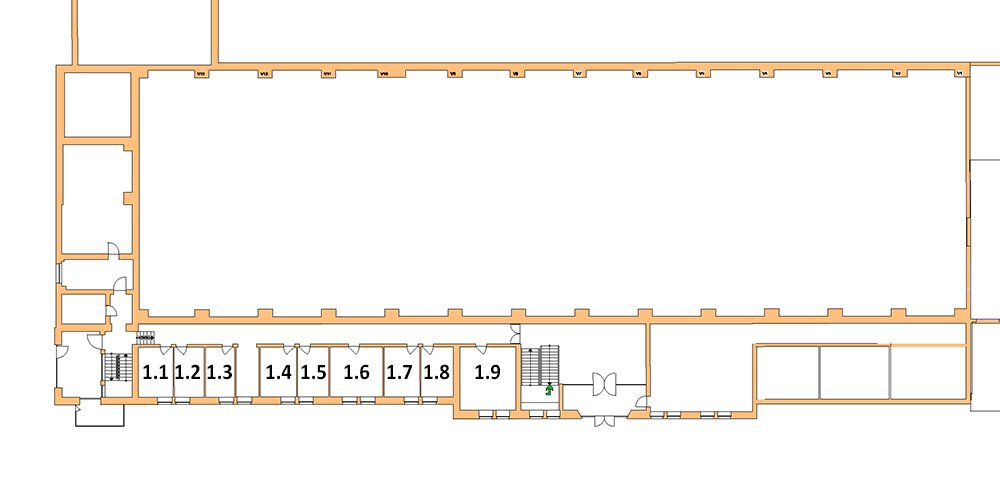
<style>
.page{position:relative;width:1000px;height:480px;background:#ffffff}
.page>*{position:absolute;margin:0}
.t1{font:22.3px "Calibri-Bold";color:#000000;scale:0.94 1}
</style>
<div class="page">
<p class="t1" style="left:143px;top:364px;width:25px;height:16px">1.1</p>
<p class="t1" style="left:175px;top:364px;width:25px;height:16px">1.2</p>
<p class="t1" style="left:207px;top:364px;width:25px;height:16px">1.3</p>
<p class="t1" style="left:266px;top:364px;width:26px;height:16px">1.4</p>
<p class="t1" style="left:301px;top:364px;width:25px;height:16px">1.5</p>
<p class="t1" style="left:344px;top:364px;width:26px;height:16px">1.6</p>
<p class="t1" style="left:387px;top:364px;width:25px;height:16px">1.7</p>
<p class="t1" style="left:424px;top:364px;width:26px;height:16px">1.8</p>
<p class="t1" style="left:475px;top:364px;width:25px;height:16px">1.9</p>
</div>
